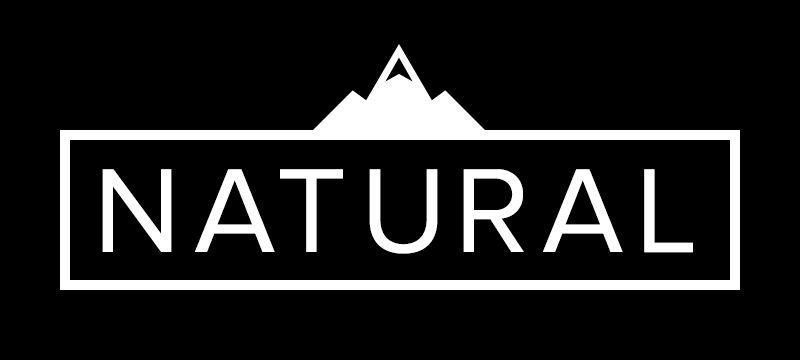
<style>
.page{position:relative;width:800px;height:360px;background:#000000}
.page>*{position:absolute;margin:0}
.t1{font:124px "ProximaNova-Regular";letter-spacing:0.1em;color:#ffffff;text-transform:uppercase}
</style>
<div class="page">
<p class="t1" style="left:102px;top:169px;width:591px;height:85px">Natural</p>
</div>
